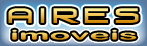
<style>
.page{position:relative;width:147px;height:46px}
.page>*{position:absolute;margin:0}
.t1{font:19.7px "VenusRising";letter-spacing:0.2em;scale:1.3 1}
.t2{font:13.9px "ArialRoundedMTBold";scale:2.48 1}
</style>
<div class="page">
<p class="t1" style="left:8px;top:8px;width:131px;height:15px">Aires</p>
<p class="t2" style="left:12px;top:29px;width:125px;height:11px">imoveis</p>
</div>
